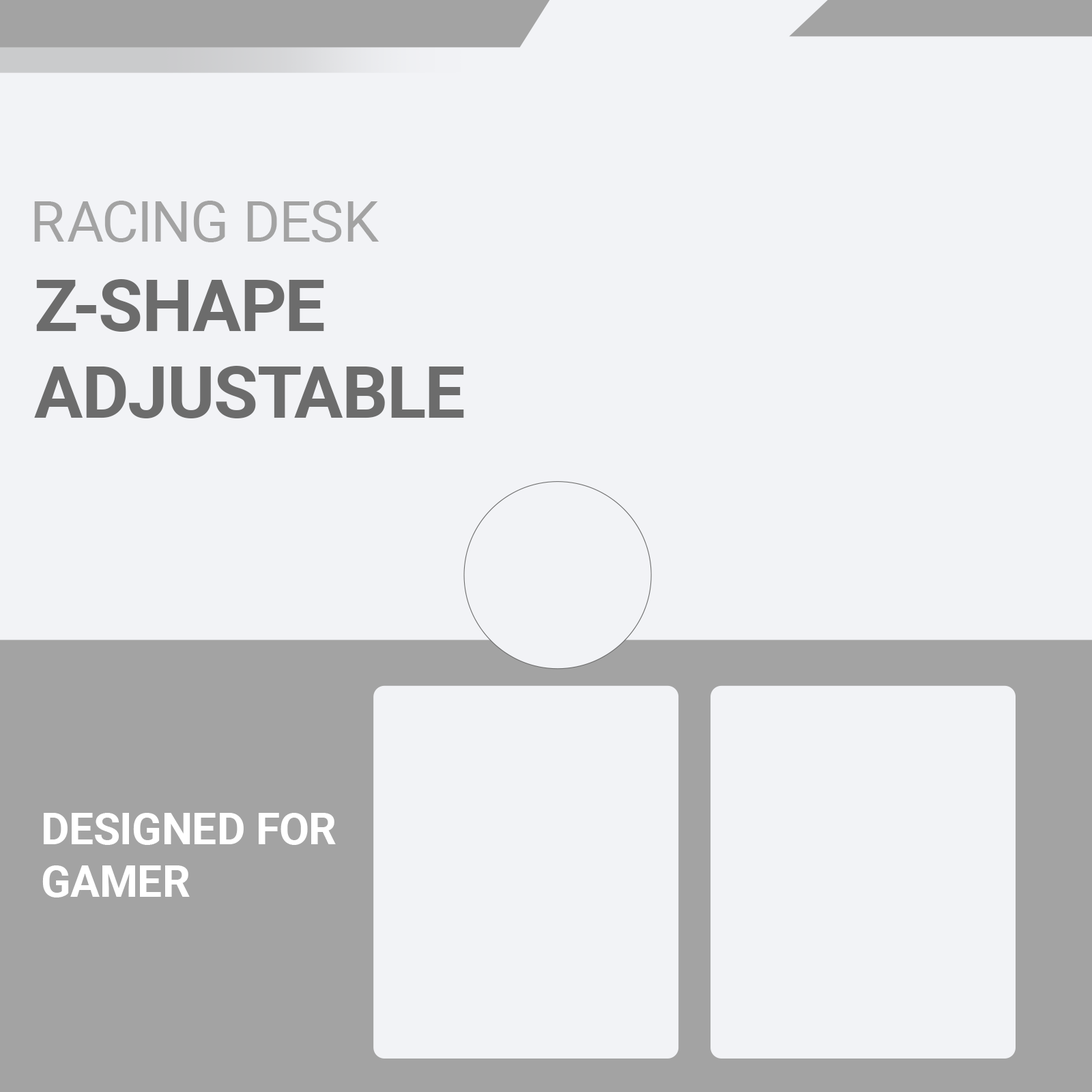
<style>
.page{position:relative;width:1092px;height:1092px;background:#f2f3f6}
.page>*{position:absolute;margin:0}
.t1{font:56.8px "Roboto-Regular";color:#a3a3a3}
.t2{font:72.1px "Roboto-Bold";color:#6c6c6c}
.t3{font:43.7px "Roboto-Bold";color:#ffffff}
</style>
<div class="page">
<p class="t1" style="left:34px;top:201px;width:345px;height:41px">RACING DESK</p>
<p class="t2" style="left:34px;top:279px;width:430px;height:139px">Z-SHAPE<br>ADJUSTABLE</p>
<p class="t3" style="left:42px;top:813px;width:294px;height:84px">DESIGNED FOR<br>GAMER</p>
</div>
